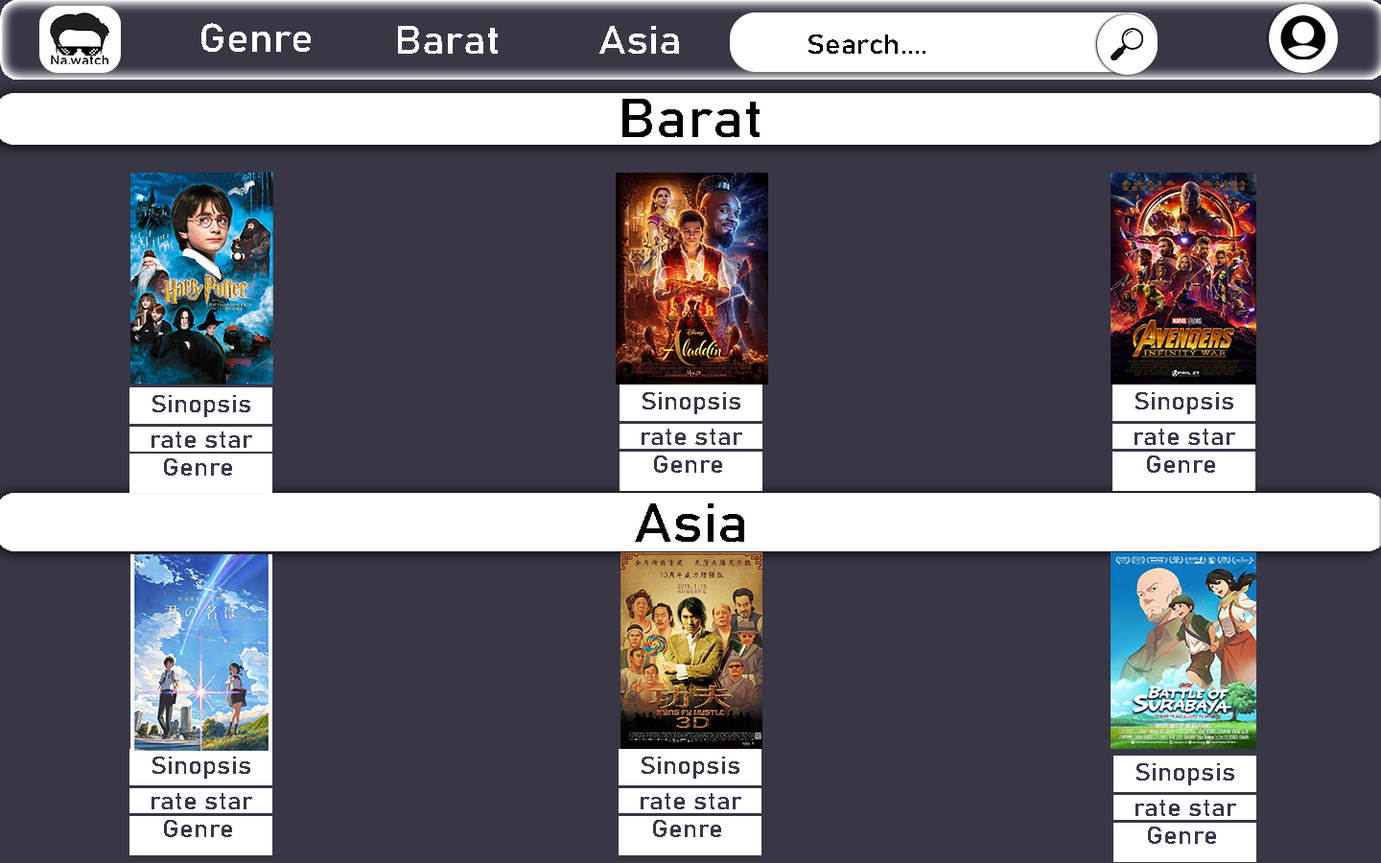
<style>
.page{position:relative;width:1381px;height:863px;background:#393646}
.page>*{position:absolute;margin:0}
.t1{font:39.5px "Bahnschrift";color:#ffffff;scale:1.08 1}
.t2{font:27.2px "Bahnschrift";color:#000000;scale:1.08 1}
.t3{font:54.5px "Bahnschrift";color:#000000;scale:1.08 1}
.t4{font:24.5px "Bahnschrift";color:#393646;scale:1.08 1}
</style>
<div class="page">
<p class="t1" style="left:201px;top:23px;width:110px;height:29px">Genre</p>
<p class="t1" style="left:398px;top:26px;width:100px;height:28px">Barat</p>
<p class="t1" style="left:600px;top:26px;width:79px;height:28px">Asia</p>
<p class="t2" style="left:809px;top:35px;width:117px;height:19px">Search....</p>
<p class="t3" style="left:623px;top:99px;width:137px;height:38px">Barat</p>
<p class="t4" style="left:153px;top:395px;width:97px;height:22px">Sinopsis</p>
<p class="t4" style="left:643px;top:392px;width:98px;height:22px">Sinopsis</p>
<p class="t4" style="left:1136px;top:392px;width:98px;height:22px">Sinopsis</p>
<p class="t4" style="left:152px;top:432px;width:100px;height:16px">rate star</p>
<p class="t4" style="left:642px;top:429px;width:100px;height:16px">rate star</p>
<p class="t4" style="left:1135px;top:429px;width:100px;height:16px">rate star</p>
<p class="t4" style="left:164px;top:459px;width:68px;height:17px">Genre</p>
<p class="t4" style="left:654px;top:456px;width:68px;height:17px">Genre</p>
<p class="t4" style="left:1147px;top:456px;width:68px;height:17px">Genre</p>
<p class="t3" style="left:635px;top:504px;width:109px;height:38px">Asia</p>
<p class="t4" style="left:153px;top:757px;width:97px;height:22px">Sinopsis</p>
<p class="t4" style="left:642px;top:757px;width:98px;height:22px">Sinopsis</p>
<p class="t4" style="left:1137px;top:764px;width:98px;height:22px">Sinopsis</p>
<p class="t4" style="left:152px;top:793px;width:100px;height:17px">rate star</p>
<p class="t4" style="left:641px;top:793px;width:100px;height:17px">rate star</p>
<p class="t4" style="left:1136px;top:800px;width:100px;height:16px">rate star</p>
<p class="t4" style="left:164px;top:820px;width:68px;height:17px">Genre</p>
<p class="t4" style="left:653px;top:820px;width:68px;height:17px">Genre</p>
<p class="t4" style="left:1148px;top:827px;width:68px;height:17px">Genre</p>
</div>
